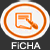
<style>
.page{position:relative;width:50px;height:50px;background:#333333}
.page>*{position:absolute;margin:0}
.t1{font:9.1px "ArialMT";color:#ffffff;scale:1.1 1}
</style>
<div class="page">
<p class="t1" style="left:11px;top:42px;width:30px;height:8px">FiCHA</p>
</div>
